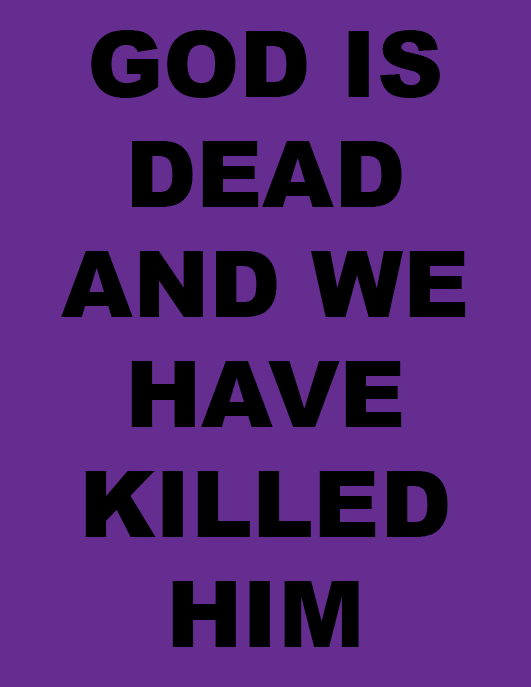
<style>
.page{position:relative;width:531px;height:687px;background:#662d91}
.page>*{position:absolute;margin:0}
.t1{font:91.7px "Arial-Black";color:#000000}
</style>
<div class="page">
<p class="t1" style="left:61px;top:30px;width:405px;height:617px;text-align:center">GOD IS DEAD AND WE HAVE KILLED HIM</p>
</div>
